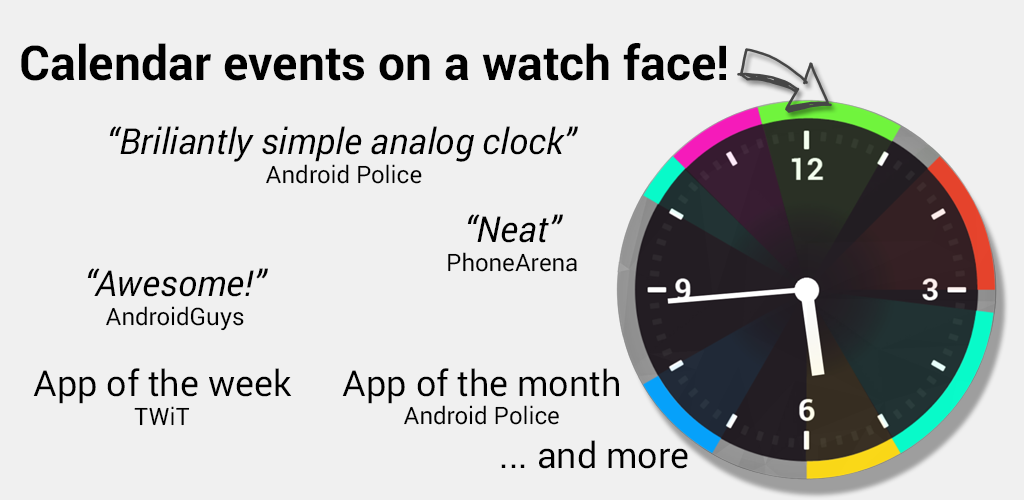
<style>
.page{position:relative;width:1024px;height:500px;background:#f0f0f0}
.page>*{position:absolute;margin:0}
.t1{font:48px "Roboto-Bold";color:#000000}
.t2{font:36px "Roboto-Italic";color:#000000}
.t3{font:24px "Roboto-Regular";color:#000000}
.t4{font:36px "Roboto-Regular";color:#000000}
</style>
<div class="page">
<p class="t1" style="left:21px;top:43px;width:705px;height:38px">Calendar events on a watch face!</p>
<p class="t2" style="left:109px;top:126px;width:469px;height:58px;text-align:center">“Briliantly simple analog clock”<br> <span class="t3">Android Police</span></p>
<p class="t3" style="left:448px;top:214px;width:129px;height:58px;text-align:center"><span class="t2">“Neat”<br></span>PhoneArena</p>
<p class="t3" style="left:87px;top:268px;width:181px;height:63px;text-align:center"><span class="t2">“Awesome!”<br></span>AndroidGuys</p>
<p class="t4" style="left:33px;top:368px;width:259px;height:58px;text-align:center">App of the week<br><span class="t3">TWiT</span></p>
<p class="t4" style="left:342px;top:368px;width:277px;height:57px;text-align:center">App of the month<br><span class="t3">Android Police</span></p>
<p class="t4" style="left:501px;top:440px;width:187px;height:29px">... and more</p>
</div>
